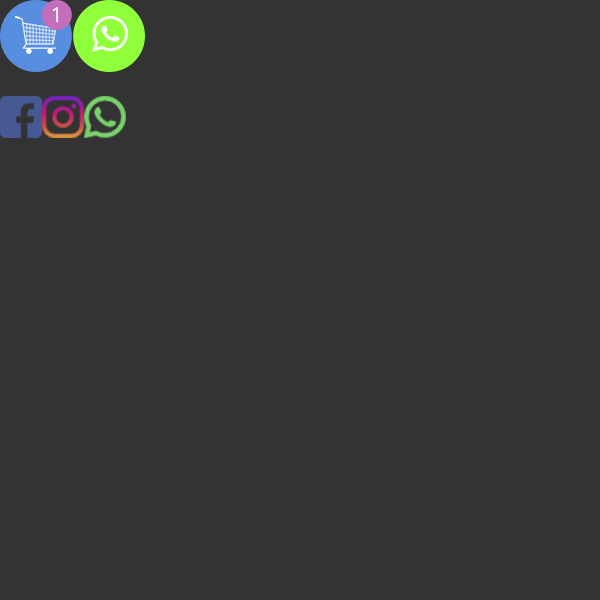
<style>
.page{position:relative;width:600px;height:600px;background:#333333}
.page>*{position:absolute;margin:0}
.t1{font:20.7px "OpenSans";letter-spacing:-0.01em;color:#ffffff}
</style>
<div class="page">
<p class="t1" style="left:52px;top:7px;width:7px;height:16px">1</p>
</div>
